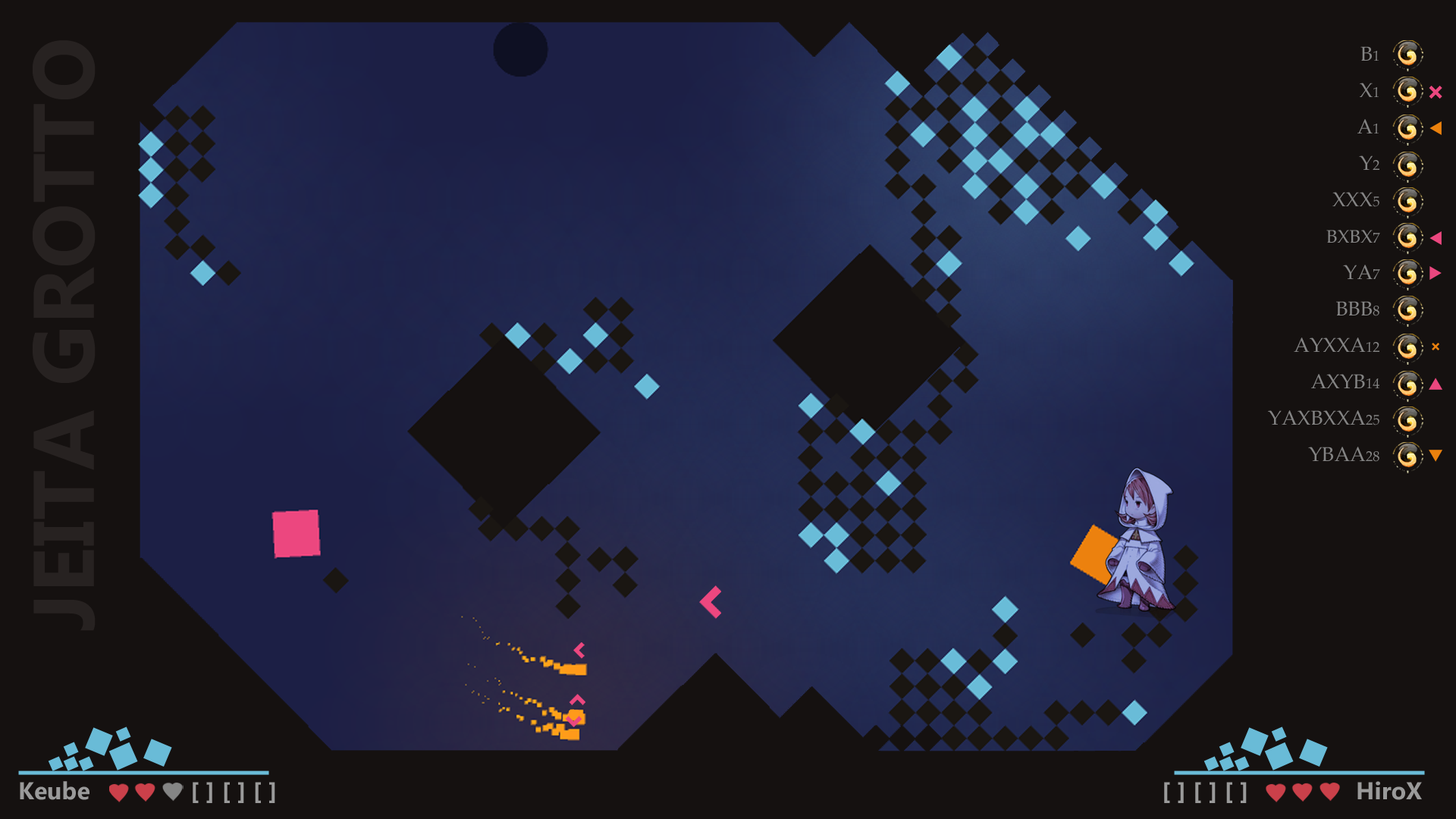
<style>
.page{position:relative;width:1456px;height:819px;background:#151110}
.page>*{position:absolute;margin:0}
.t1{font:85.9px "Ebrima-Bold";color:#272221}
.t2{font:20.2px/36.4px "PalatinoLinotype-Roman";color:#838383}
.t3{font:20.2px/36.4px "PalatinoLinotype-Roman";color:#848484}
.t4{font:14.2px/36.4px "PalatinoLinotype-Roman";color:#848484}
.t5{font:18.2px/36.4px "PalatinoLinotype-Roman";color:#838383}
.t6{font:14.2px/36.4px "PalatinoLinotype-Roman";color:#838383}
.t7{font:24.3px "Ebrima-Bold";color:#9a9a9a}
</style>
<div class="page">
<p class="t1" style="left:32px;top:40px;width:64px;height:591px;rotate:-90deg">JEITA GROTTO</p>
<p class="t2" style="left:1268px;top:46px;width:112px;height:416px;text-align:right"><span class="t3">B</span><span class="t4">1<br></span><span class="t3">X</span><span class="t4">1<br></span><span class="t3">A</span><span class="t4">1<br></span>Y<span class="t4">2<br></span>XXX<span class="t4">5<br></span><span class="t5">BXBX</span><span class="t4">7<br></span>YA<span class="t6">7<br></span>BBB<span class="t6">8<br></span>AYXXA<span class="t6">12<br></span>AXYB<span class="t6">14<br></span>YAXBXXA<span class="t6">25<br></span>YBAA<span class="t6">28</span></p>
<p class="t7" style="left:20px;top:781px;width:255px;height:22px">Keube               [ ] [ ] [ ]</p>
<p class="t7" style="left:1164px;top:781px;width:258px;height:22px">[ ] [ ] [ ]                HiroX</p>
</div>
